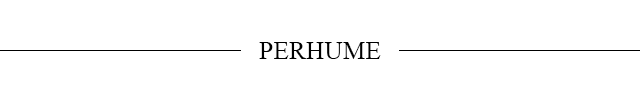
<style>
.page{position:relative;width:640px;height:100px;background:#ffffff}
.page>*{position:absolute;margin:0}
.t1{font:25px "TimesNewRomanPSMT";letter-spacing:0.028em;color:#000000}
</style>
<div class="page">
<p class="t1" style="left:259px;top:42px;width:122px;height:17px">PERHUME</p>
</div>
